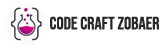
<style>
.page{position:relative;width:164px;height:48px;background:#ffffff}
.page>*{position:absolute;margin:0}
.t1{font:18px "BebasNeue-Regular";color:#282828}
</style>
<div class="page">
<p class="t1" style="left:50px;top:16px;width:110px;height:14px">CODE CRAFT ZOBAER</p>
</div>
